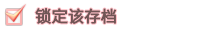
<style>
.page{position:relative;width:218px;height:30px;background:#ffffff}
.page>*{position:absolute;margin:0}
.t1{font:16px "SourceHanSansSC-Regular";color:#7c6a6a;font-weight:bold}
</style>
<div class="page">
<p class="t1" style="left:35px;top:8px;width:81px;height:16px">锁定该存档</p>
</div>
